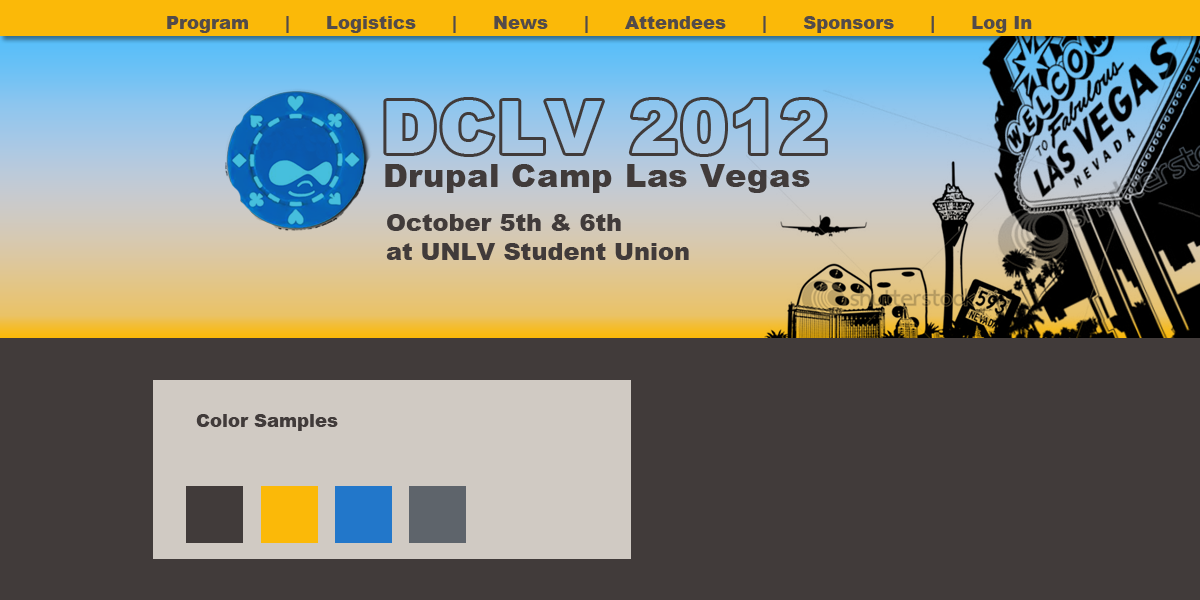
<style>
.page{position:relative;width:1200px;height:600px;background:#413b3a}
.page>*{position:absolute;margin:0}
.t1{font:18px "Arial-Black";color:#534b4a}
.t2{font:72px "Arial-Black";letter-spacing:0.025em;color:#9dc7e9}
.t3{font:32px "Arial-Black";letter-spacing:0.018em;color:#413b3a}
.t4{font:24px "Arial-Black";color:#413b3a}
.t5{font:18px "Arial-Black";color:#413b3a}
</style>
<div class="page">
<p class="t1" style="left:167px;top:16px;width:865px;height:17px">Program      |      Logistics      |      News      |      Attendees      |      Sponsors      |      Log In</p>
<p class="t2" style="left:386px;top:100px;width:439px;height:54px">DCLV 2012</p>
<p class="t3" style="left:385px;top:164px;width:425px;height:29px">Drupal Camp Las Vegas</p>
<p class="t4" style="left:386px;top:214px;width:303px;height:46px">October 5th &amp; 6th<br>at UNLV Student Union</p>
<p class="t5" style="left:196px;top:414px;width:142px;height:17px">Color Samples</p>
</div>
